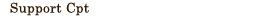
<style>
.page{position:relative;width:272px;height:18px;background:#ffffff}
.page>*{position:absolute;margin:0}
.t1{font:13.3px "CenturySchoolbook";letter-spacing:0.025em;color:#321a02}
</style>
<div class="page">
<p class="t1" style="left:10px;top:2px;width:79px;height:14px">Support Cpt</p>
</div>
